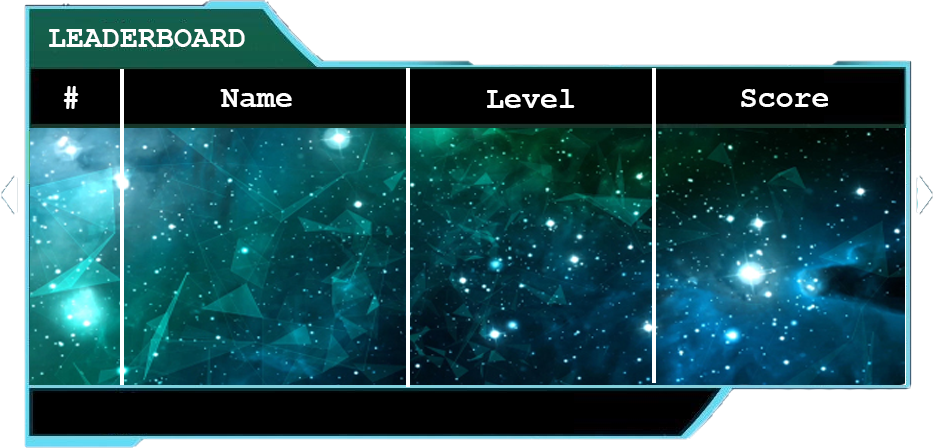
<style>
.page{position:relative;width:934px;height:448px}
.page>*{position:absolute;margin:0}
.t1{font:30px "CourierNewPS-BoldMT";color:#fefefe}
</style>
<div class="page">
<p class="t1" style="left:49px;top:29px;width:196px;height:18px">LEADERBOARD</p>
<p class="t1" style="left:63px;top:86px;width:16px;height:23px">#</p>
<p class="t1" style="left:220px;top:89px;width:72px;height:18px">Name</p>
<p class="t1" style="left:487px;top:89px;width:88px;height:19px">Level</p>
<p class="t1" style="left:741px;top:89px;width:87px;height:18px">Score</p>
</div>
